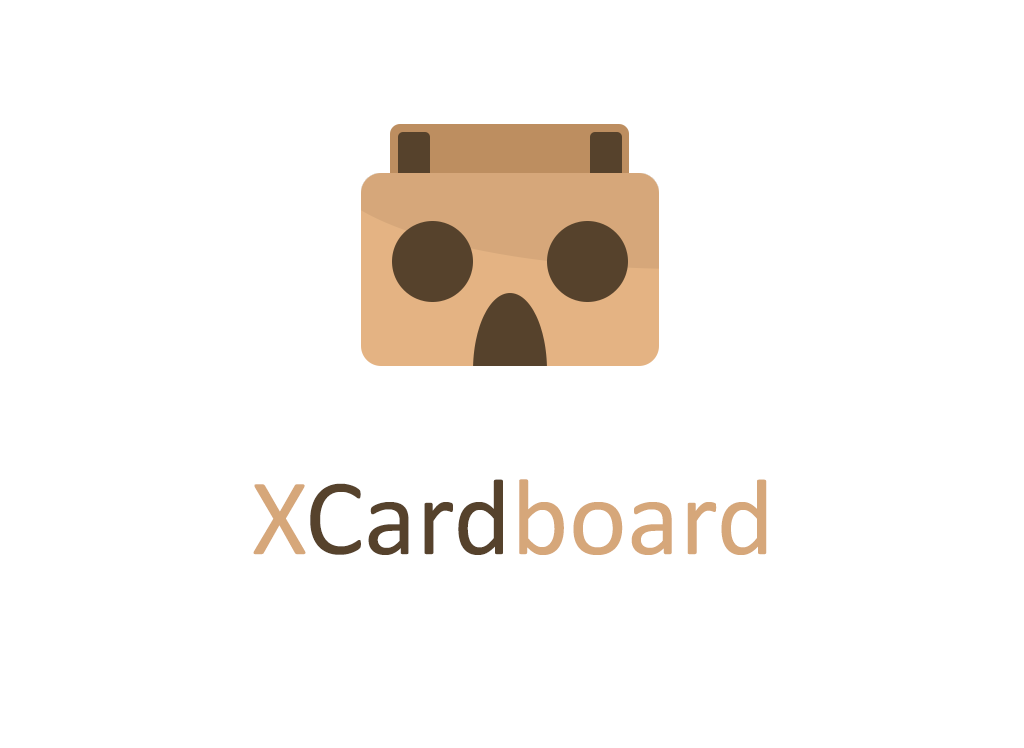
<style>
.page{position:relative;width:1024px;height:748px;background:#ffffff}
.page>*{position:absolute;margin:0}
.t1{font:110px "Calibri";color:#d6a77a}
.t2{font:110px "Calibri";color:#56422c}
</style>
<div class="page">
<p class="t1" style="left:253px;top:479px;width:514px;height:76px">X<span class="t2">Card</span>board</p>
</div>
